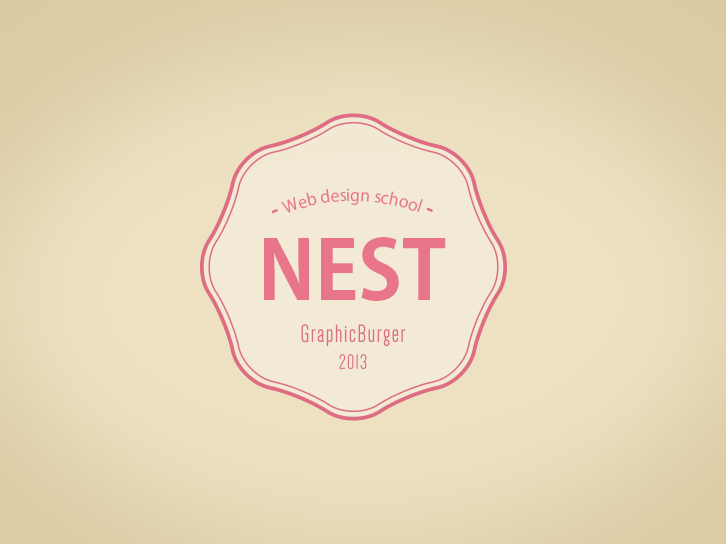
<style>
.page{position:relative;width:726px;height:544px}
.page>*{position:absolute;margin:0}
.t1{font:16.2px "KozGoPr6N-Regular";color:#e9758b}
.t2{font:80.2px "KozGoPr6N-Bold";color:#e9758b}
</style>
<div class="page">
<p class="t1" style="left:281px;top:188px;width:142px;height:25px">Web design school</p>
<p class="t2" style="left:264px;top:237px;width:182px;height:64px">NEST</p>
</div>
